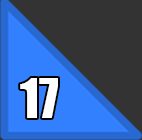
<style>
.page{position:relative;width:142px;height:140px;background:#333333}
.page>*{position:absolute;margin:0}
.t1{font:50px "Impact";color:#ffffff}
</style>
<div class="page">
<p class="t1" style="left:20px;top:78px;width:38px;height:40px">17</p>
</div>
